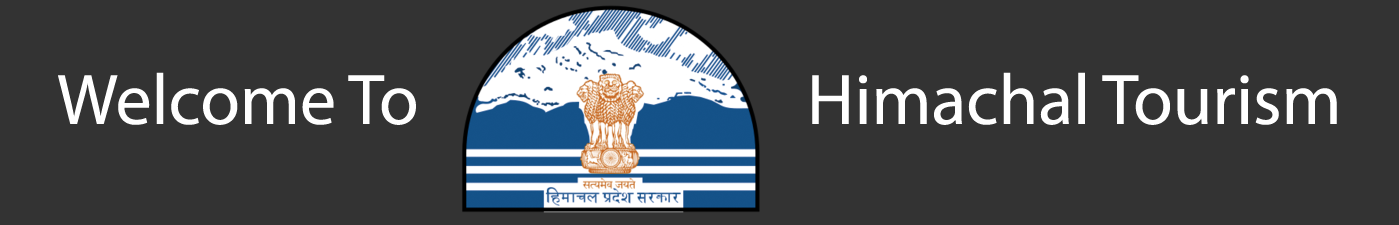
<style>
.page{position:relative;width:1399px;height:225px;background:#333333}
.page>*{position:absolute;margin:0}
.t1{font:72px "MyriadPro-Regular";color:#ffffff}
</style>
<div class="page">
<p class="t1" style="left:58px;top:72px;width:358px;height:53px">Welcome To</p>
<p class="t1" style="left:812px;top:72px;width:525px;height:53px">Himachal Tourism</p>
</div>
